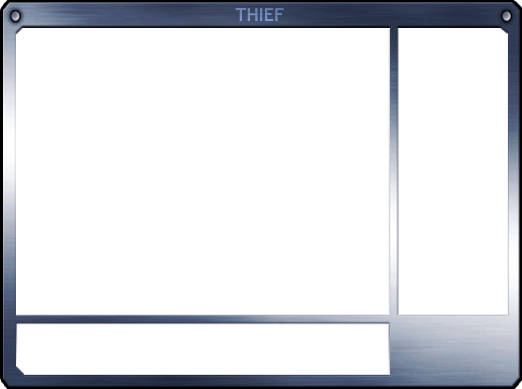
<style>
.page{position:relative;width:522px;height:389px;background:#ffffff}
.page>*{position:absolute;margin:0}
.t1{font:18px "TrebuchetMS-Bold";color:#6e85b7}
</style>
<div class="page">
<p class="t1" style="left:235px;top:8px;width:49px;height:13px">THIEF</p>
</div>
